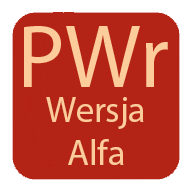
<style>
.page{position:relative;width:192px;height:192px;background:#b32416}
.page>*{position:absolute;margin:0}
.t1{font:36px "MyriadPro-Regular";color:#fccc9a}
</style>
<div class="page">
<p class="t1" style="left:46px;top:97px;width:98px;height:68px;text-align:center">Wersja Alfa</p>
</div>
